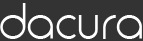
<style>
.page{position:relative;width:143px;height:41px;background:#333333}
.page>*{position:absolute;margin:0}
.t1{font:48px "TimeBurner";color:#ffffff}
</style>
<div class="page">
<p class="t1" style="left:0px;top:3px;width:142px;height:36px">dacura</p>
</div>
